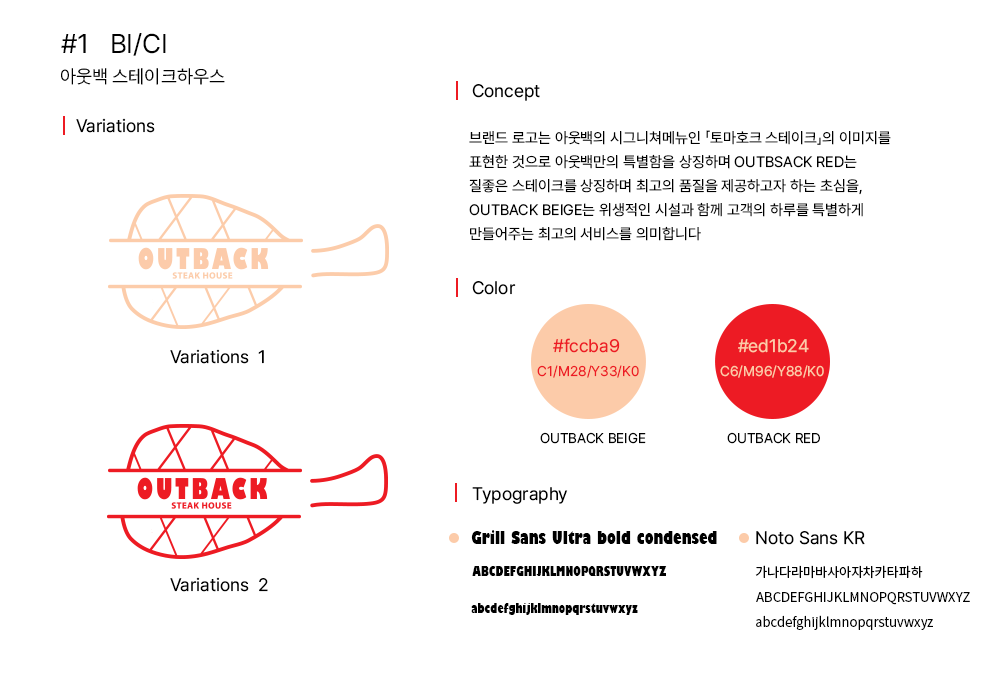
<style>
.page{position:relative;width:1000px;height:700px;background:#ffffff}
.page>*{position:absolute;margin:0}
.t1{font:27px "Pretendard-Regular";color:#000000}
.t2{font:18.7px "Pretendard-Regular";color:#000000}
.t3{font:18px "Pretendard-Regular";color:#000000}
.t4{font:15px/24px "Pretendard-Regular";color:#000000}
.t5{font:18px "Pretendard-Regular";color:#ed1b24}
.t6{font:18px "Pretendard-Regular";color:#fccba9}
.t7{font:14px "Pretendard-Regular";color:#ed1b24}
.t8{font:14px "Pretendard-Regular";color:#fccba9}
.t9{font:14px "Pretendard-Regular";color:#000000}
.t10{font:18px "GillSans-UltraBoldCondensed";color:#000000}
.t11{font:13px "GillSans-UltraBoldCondensed";color:#000000}
.t12{font:13px "NotoSansKR-Regular";color:#000000}
</style>
<div class="page">
<p class="t1" style="left:61px;top:33px;width:105px;height:23px">#1   BI/CI</p>
<p class="t2" style="left:61px;top:68px;width:164px;height:17px">아웃백 스테이크하우스</p>
<p class="t3" style="left:472px;top:84px;width:68px;height:17px">Concept</p>
<p class="t3" style="left:76px;top:118px;width:79px;height:15px">Variations</p>
<p class="t4" style="left:469px;top:130px;width:422px;height:111px">브랜드 로고는 아웃백의 시그니쳐메뉴인 「토마호크 스테이크」의 이미지를 <br>표현한 것으로 아웃백만의 특별함을 상징하며 OUTBSACK RED는<br>질좋은 스테이크를 상징하며 최고의 품질을 제공하고자 하는 초심을, <br>OUTBACK BEIGE는 위생적인 시설과 함께 고객의 하루를 특별하게<br>만들어주는 최고의 서비스를 의미합니다</p>
<p class="t3" style="left:472px;top:281px;width:44px;height:14px">Color</p>
<p class="t5" style="left:553px;top:338px;width:67px;height:15px">#fccba9</p>
<p class="t6" style="left:738px;top:339px;width:71px;height:14px">#ed1b24</p>
<p class="t3" style="left:170px;top:349px;width:94px;height:15px">Variations  1</p>
<p class="t7" style="left:537px;top:365px;width:102px;height:13px">C1/M28/Y33/K0</p>
<p class="t8" style="left:720px;top:365px;width:104px;height:13px">C6/M96/Y88/K0</p>
<p class="t9" style="left:540px;top:432px;width:106px;height:12px">OUTBACK BEIGE</p>
<p class="t9" style="left:727px;top:432px;width:93px;height:12px">OUTBACK RED</p>
<p class="t3" style="left:472px;top:487px;width:96px;height:17px">Typography</p>
<p class="t10" style="left:471px;top:530px;width:246px;height:14px">Grill Sans Ultra bold condensed</p>
<p class="t3" style="left:756px;top:531px;width:109px;height:14px">Noto Sans KR</p>
<p class="t11" style="left:472px;top:566px;width:195px;height:10px">ABCDEFGHIJKLMNOPQRSTUVWXYZ</p>
<p class="t12" style="left:755px;top:565px;width:168px;height:14px">가나다라마바사아자차카타파하</p>
<p class="t3" style="left:170px;top:577px;width:98px;height:15px">Variations  2</p>
<p class="t12" style="left:756px;top:592px;width:214px;height:13px">ABCDEFGHIJKLMNOPQRSTUVWXYZ</p>
<p class="t11" style="left:471px;top:603px;width:167px;height:12px">abcdefghijklmnopqrstuvwxyz</p>
<p class="t12" style="left:756px;top:615px;width:177px;height:15px">abcdefghijklmnopqrstuvwxyz</p>
</div>
